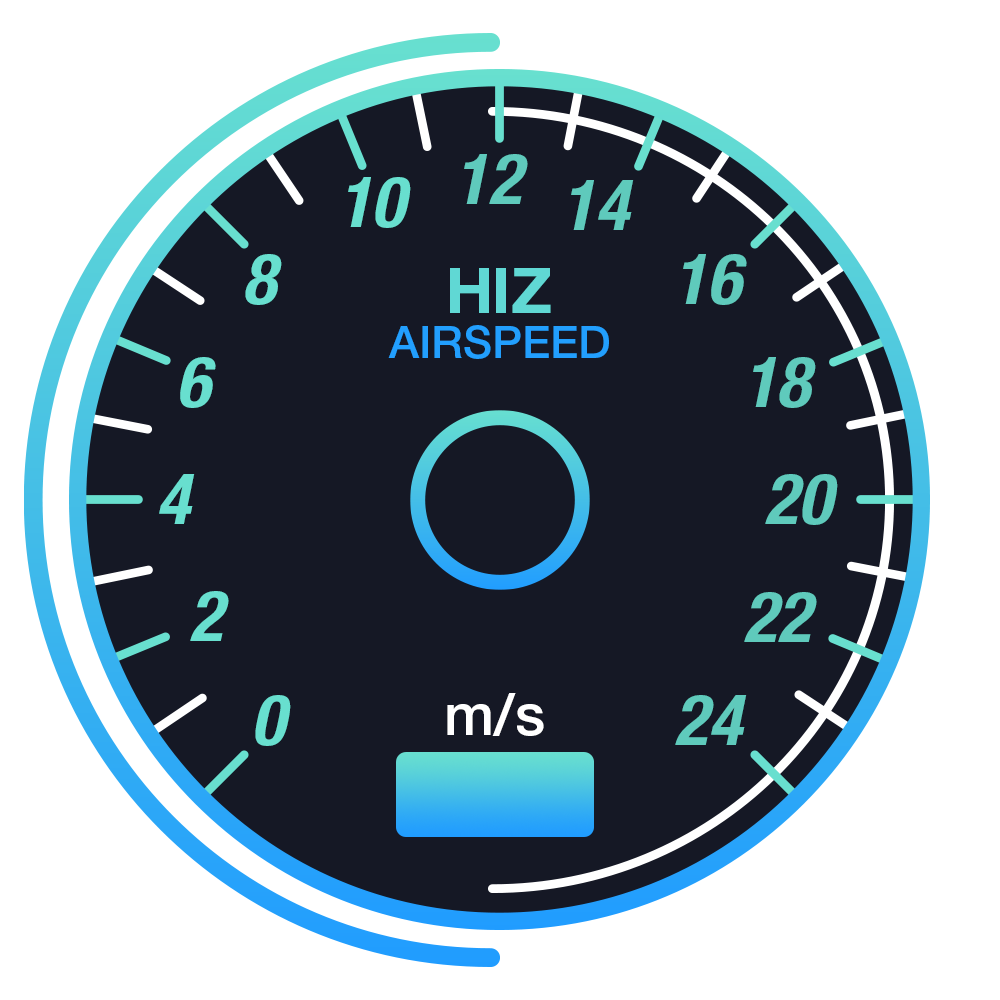
<style>
.page{position:relative;width:1000px;height:1000px;background:#151825}
.page>*{position:absolute;margin:0}
.t1{font:70px "HelveticaNeueLTPro-BdCnO";color:#68dfcf}
.t2{font:63.3px "HelveticaNeueLTPro-Bd";color:#60d8d4}
.t3{font:44.9px "HelveticaNeueLTPro-Md";color:#229ffe}
.t4{font:57.5px "HelveticaNeueLTPro-Md";color:#ffffff}
</style>
<div class="page">
<p class="t1" style="left:464px;top:154px;width:64px;height:50px;opacity:0.85">12</p>
<p class="t1" style="left:348px;top:177px;width:63px;height:51px">10</p>
<p class="t1" style="left:571px;top:180px;width:63px;height:50px;opacity:0.85">14</p>
<p class="t1" style="left:245px;top:254px;width:37px;height:51px">8</p>
<p class="t1" style="left:683px;top:254px;width:64px;height:51px;opacity:0.85">16</p>
<p class="t2" style="left:450px;top:268px;width:101px;height:45px">HIZ</p>
<p class="t3" style="left:388px;top:325px;width:221px;height:34px">AIRSPEED</p>
<p class="t1" style="left:180px;top:357px;width:36px;height:51px">6</p>
<p class="t1" style="left:753px;top:357px;width:63px;height:51px;opacity:0.85">18</p>
<p class="t1" style="left:159px;top:474px;width:36px;height:50px">4</p>
<p class="t1" style="left:765px;top:474px;width:73px;height:51px;opacity:0.85">20</p>
<p class="t1" style="left:190px;top:591px;width:39px;height:50px">2</p>
<p class="t1" style="left:744px;top:592px;width:73px;height:50px;opacity:0.85">22</p>
<p class="t1" style="left:255px;top:695px;width:36px;height:51px">0</p>
<p class="t4" style="left:447px;top:693px;width:97px;height:43px">m/s</p>
<p class="t1" style="left:675px;top:695px;width:72px;height:50px;opacity:0.85">24</p>
</div>
